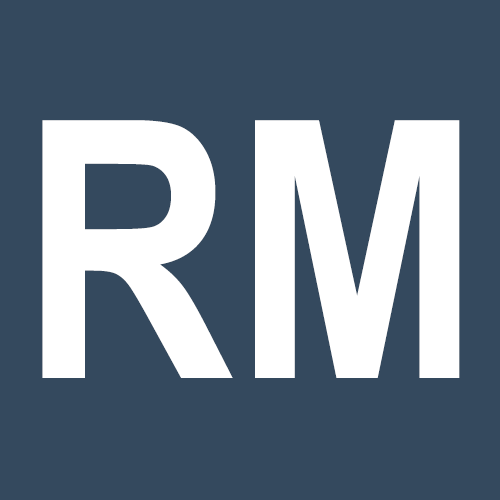
<style>
.page{position:relative;width:500px;height:500px;background:#34495e}
.page>*{position:absolute;margin:0}
.t1{font:360px "ArialNarrow-Bold";color:#ffffff}
</style>
<div class="page">
<p class="t1" style="left:42px;top:120px;width:418px;height:258px">RM</p>
</div>
